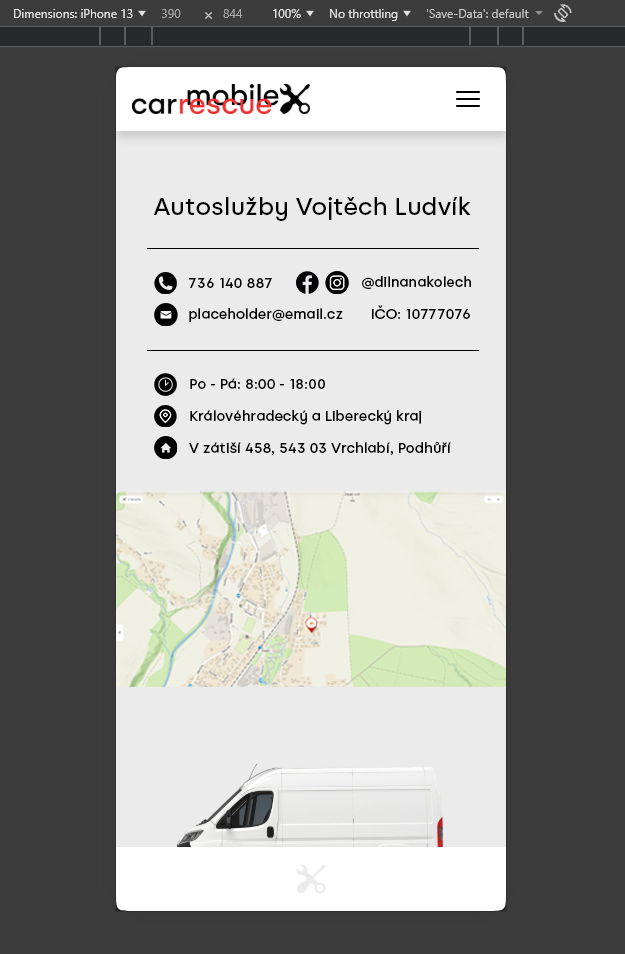
<style>
.page{position:relative;width:625px;height:954px;background:#3c3c3c}
.page>*{position:absolute;margin:0}
.t1{font:24px "Alcyone-Medium";color:#000000}
.t2{font:14px "Alcyone-Medium";color:#000000}
</style>
<div class="page">
<p class="t1" style="left:153px;top:196px;width:318px;height:25px">Autoslužby Vojtěch Ludvík</p>
<p class="t2" style="left:189px;top:278px;width:83px;height:10px">736 140 887</p>
<p class="t2" style="left:362px;top:275px;width:109px;height:14px">@dilnanakolech</p>
<p class="t2" style="left:372px;top:305px;width:98px;height:14px">IČO: 10777076</p>
<p class="t2" style="left:189px;top:308px;width:154px;height:14px">placeholder@email.cz</p>
<p class="t2" style="left:190px;top:378px;width:135px;height:11px">Po - Pá: 8:00 - 18:00</p>
<p class="t2" style="left:190px;top:409px;width:232px;height:16px">Královéhradecký a Liberecký kraj</p>
<p class="t2" style="left:189px;top:442px;width:262px;height:13px">V zátiší 458, 543 03 Vrchlabí, Podhůří</p>
</div>
